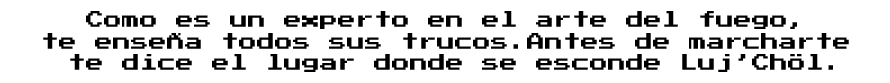
<style>
.page{position:relative;width:890px;height:83px;background:#ffffff}
.page>*{position:absolute;margin:0}
.t1{font:18px "PressStart2P";color:#000000}
</style>
<div class="page">
<p class="t1" style="left:43px;top:11px;width:806px;height:61px;text-align:center">Como es un experto en el arte del fuego, <br>te enseña todos sus trucos.Antes de marcharte <br>te dice el lugar donde se esconde Luj’Chöl.</p>
</div>
